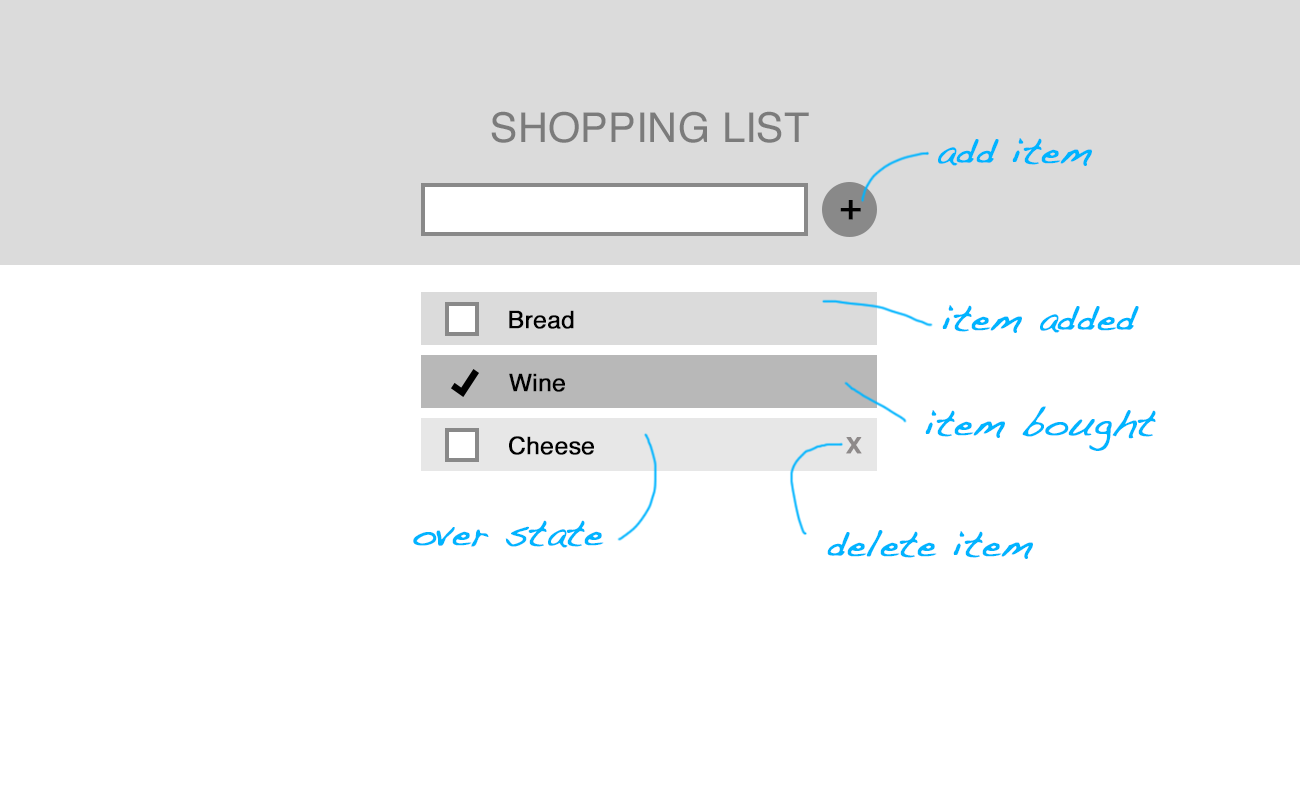
<style>
.page{position:relative;width:1300px;height:800px;background:#ffffff}
.page>*{position:absolute;margin:0}
.t1{font:41.1px "Helvetica";color:#7c7c7c;text-transform:uppercase}
.t2{font:37.3px "Handwriting-Dakota";color:#00b4ff;font-weight:bold}
.t3{font:37.3px "Helvetica";color:#000000;text-transform:uppercase;font-weight:bold}
.t4{font:23.9px "Helvetica";color:#000000;font-weight:bold}
.t5{font:30.6px "Helvetica";color:#8e8a8a;font-weight:bold}
</style>
<div class="page">
<p class="t1" style="left:491px;top:111px;width:318px;height:32px">Shopping list</p>
<p class="t2" style="left:938px;top:138px;width:154px;height:28px">add item</p>
<p class="t3" style="left:840px;top:200px;width:21px;height:20px">+</p>
<p class="t2" style="left:942px;top:305px;width:197px;height:28px">item added</p>
<p class="t4" style="left:509px;top:310px;width:65px;height:19px">Bread</p>
<p class="t4" style="left:509px;top:373px;width:56px;height:19px">Wine</p>
<p class="t2" style="left:925px;top:406px;width:231px;height:45px">item bought</p>
<p class="t4" style="left:509px;top:436px;width:85px;height:19px">Cheese</p>
<p class="t5" style="left:846px;top:437px;width:16px;height:17px">x</p>
<p class="t2" style="left:413px;top:520px;width:191px;height:28px">over state</p>
<p class="t2" style="left:827px;top:530px;width:206px;height:29px">delete item</p>
</div>
